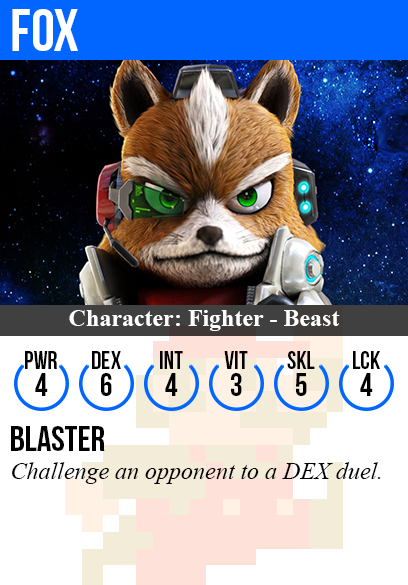
<style>
.page{position:relative;width:408px;height:585px;background:#ffffff}
.page>*{position:absolute;margin:0}
.t1{font:60px "BebasNeue";color:#ffffff}
.t2{font:24px "TimesNewRomanPS-BoldMT";color:#ffffff}
.t3{font:25px "BebasNeue";color:#000000}
.t4{font:32px "BebasNeue";color:#000000}
.t5{font:36px "BebasNeue";color:#000000}
.t6{font:24px "TimesNewRomanPS-ItalicMT";color:#000000}
</style>
<div class="page">
<p class="t1" style="left:12px;top:9px;width:66px;height:42px">fox</p>
<p class="t2" style="left:69px;top:310px;width:271px;height:21px">Character: Fighter - Beast</p>
<p class="t3" style="left:25px;top:351px;width:32px;height:18px">PWR</p>
<p class="t3" style="left:92px;top:351px;width:29px;height:18px">dex</p>
<p class="t3" style="left:160px;top:351px;width:23px;height:18px">int</p>
<p class="t3" style="left:224px;top:351px;width:24px;height:18px">vit</p>
<p class="t3" style="left:287px;top:351px;width:28px;height:18px">skl</p>
<p class="t3" style="left:353px;top:351px;width:27px;height:18px">lck</p>
<p class="t4" style="left:35px;top:373px;width:13px;height:23px">4</p>
<p class="t4" style="left:101px;top:373px;width:11px;height:23px">6</p>
<p class="t4" style="left:165px;top:373px;width:13px;height:23px">4</p>
<p class="t4" style="left:231px;top:373px;width:11px;height:23px">3</p>
<p class="t4" style="left:296px;top:373px;width:11px;height:23px">5</p>
<p class="t4" style="left:360px;top:373px;width:13px;height:23px">4</p>
<p class="t5" style="left:11px;top:426px;width:94px;height:25px">blaster</p>
<p class="t6" style="left:12px;top:462px;width:369px;height:22px">Challenge an opponent to a DEX duel.</p>
</div>
